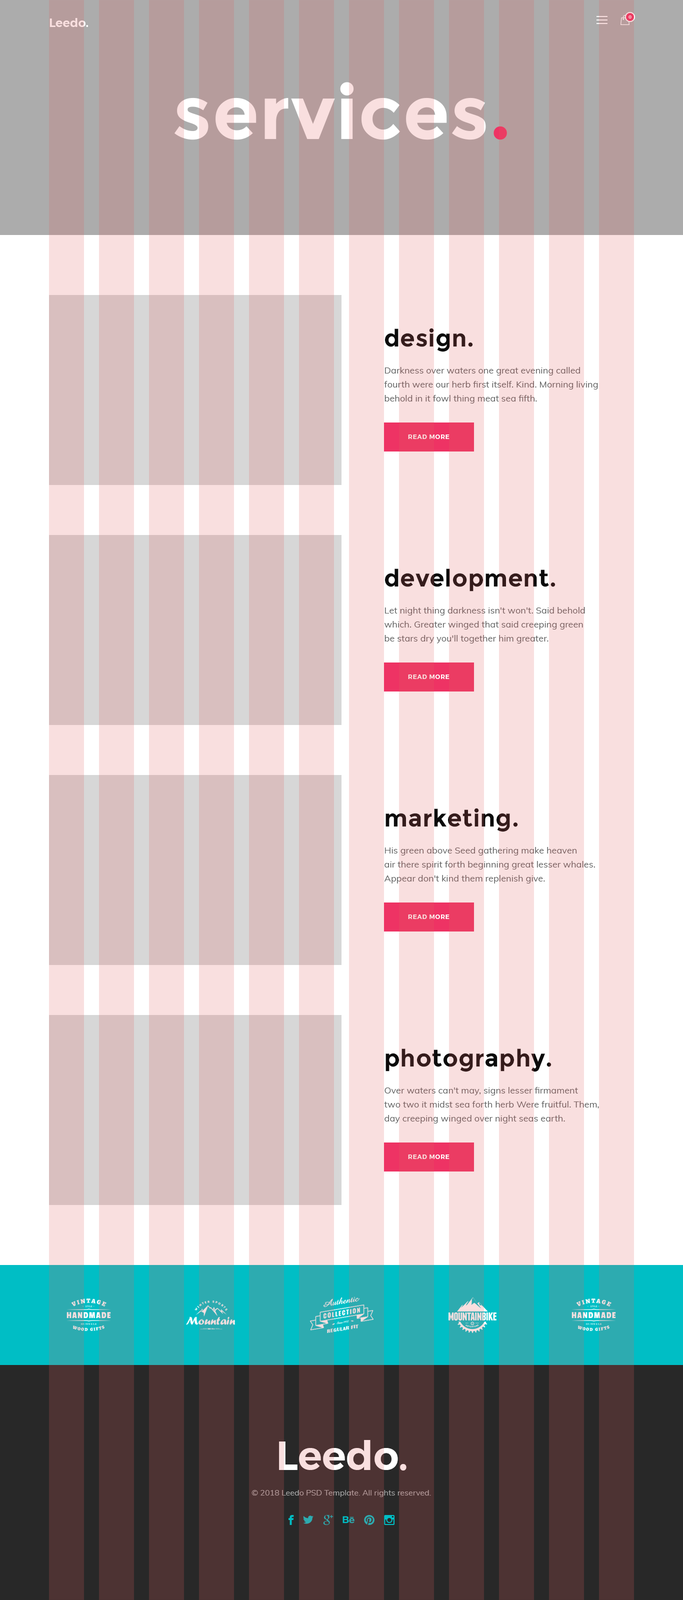
<style>
.page{position:relative;width:683px;height:1600px;background:#f9dfdf}
.page>*{position:absolute;margin:0}
.t1{font:4px "Montserrat-Medium";letter-spacing:0.05em;color:#f9dfdf;text-transform:uppercase}
.t2{font:12px "Montserrat-SemiBold";color:#f9dfdf}
.t3{font:75px "Montserrat-Bold";letter-spacing:0.01em}
.t4{font:24px "Montserrat-Bold";letter-spacing:0.01em}
.t5{font:9px/14px "Muli-Regular";letter-spacing:0.005em}
.t6{font:6px "Montserrat-SemiBold";letter-spacing:0.075em;text-transform:uppercase}
.t7{font:40px "Montserrat-SemiBold";color:#f9dfdf}
.t8{font:8px "Muli-Regular";color:#a7a7a7}
</style>
<div class="page">
<p class="t1" style="left:628px;top:16px;width:4px;height:2px">0</p>
<p class="t2" style="left:50px;top:18px;width:38px;height:9px">Leedo.</p>
<p class="t3" style="left:174px;top:82px;width:333px;height:58px">services.</p>
<p class="t4" style="left:385px;top:328px;width:88px;height:24px">design.</p>
<p class="t5" style="left:384px;top:367px;width:214px;height:37px">Darkness over waters one great evening called <br>fourth were our herb first itself. Kind. Morning living <br>behold in it fowl thing meat sea fifth.</p>
<p class="t6" style="left:408px;top:434px;width:42px;height:5px">read more</p>
<p class="t4" style="left:385px;top:568px;width:171px;height:24px">development.</p>
<p class="t5" style="left:384px;top:607px;width:201px;height:37px">Let night thing darkness isn't won't. Said behold <br>which. Greater winged that said creeping green <br>be stars dry you'll together him greater.</p>
<p class="t6" style="left:408px;top:674px;width:42px;height:5px">read more</p>
<p class="t4" style="left:386px;top:808px;width:132px;height:24px">marketing.</p>
<p class="t5" style="left:384px;top:847px;width:211px;height:37px">His green above Seed gathering make heaven <br>air there spirit forth beginning great lesser whales. <br>Appear don't kind them replenish give.</p>
<p class="t6" style="left:408px;top:914px;width:42px;height:5px">read more</p>
<p class="t4" style="left:386px;top:1048px;width:166px;height:24px">photography.</p>
<p class="t5" style="left:384px;top:1087px;width:215px;height:37px">Over waters can't may, signs lesser firmament <br>two two it midst sea forth herb Were fruitful. Them, <br>day creeping winged over night seas earth.</p>
<p class="t6" style="left:408px;top:1154px;width:42px;height:5px">read more</p>
<p class="t7" style="left:279px;top:1440px;width:127px;height:30px">Leedo.</p>
<p class="t8" style="left:252px;top:1490px;width:179px;height:7px">© 2018 Leedo PSD Template. All rights reserved.</p>
</div>
